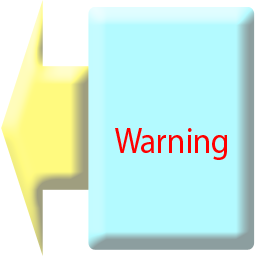
<style>
.page{position:relative;width:256px;height:256px;background:#b3faff}
.page>*{position:absolute;margin:0}
.t1{font:36px "MyriadPro-Regular";color:#ff0000;scale:0.91 1}
</style>
<div class="page">
<p class="t1" style="left:115px;top:128px;width:112px;height:32px">Warning</p>
</div>
